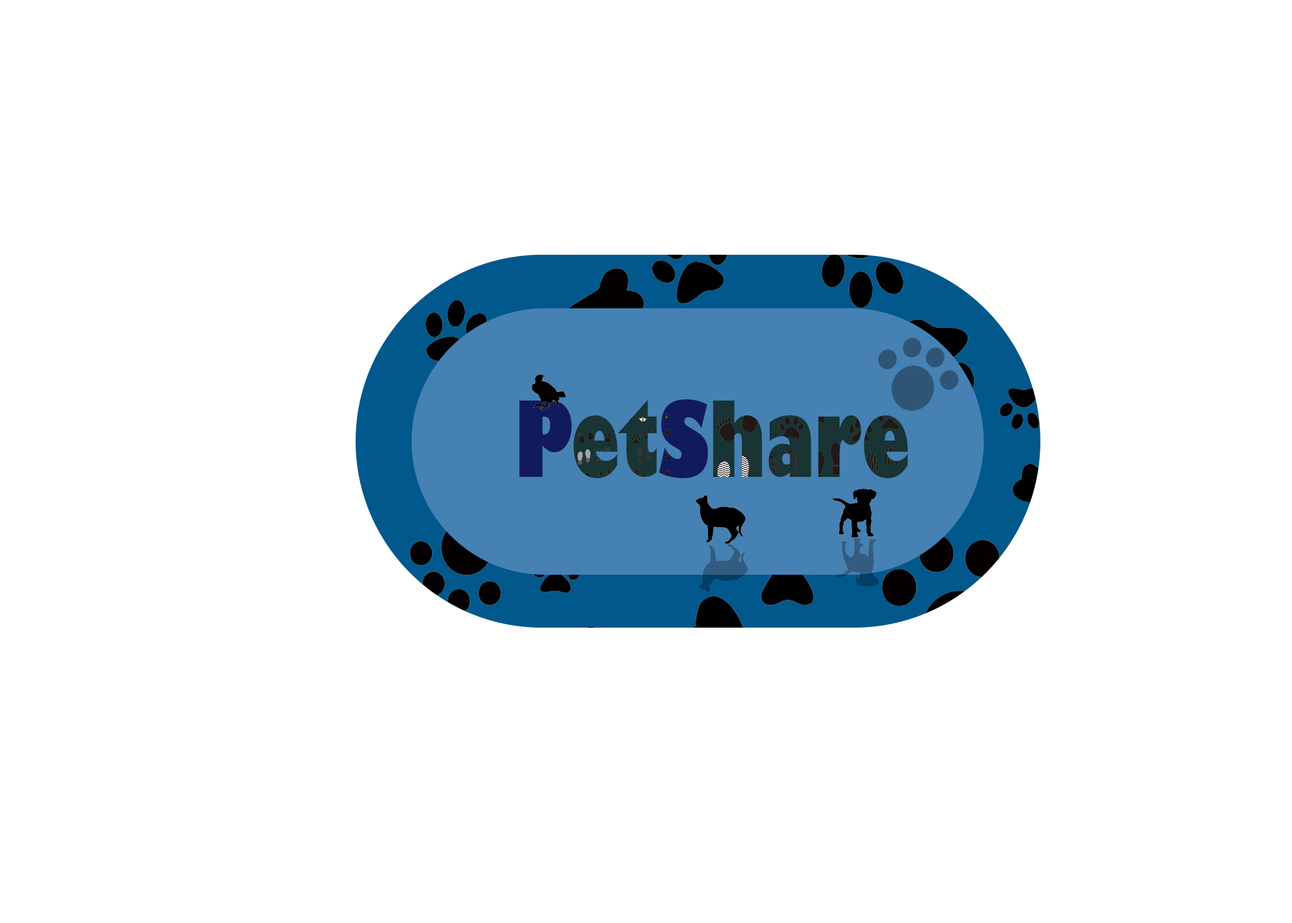
<style>
.page{position:relative;width:1292px;height:923px;background:#ffffff}
.page>*{position:absolute;margin:0}
.t1{font:102.5px "GillSans-UltraBoldCondensed";color:#183434}
.t2{font:102.5px "GillSans-UltraBoldCondensed";color:#111a5c}
</style>
<div class="page">
<p class="t1" style="left:519px;top:399px;width:389px;height:79px"><span class="t2">P</span>et<span class="t2">S</span>hare</p>
</div>
